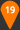
<style>
.page{position:relative;width:20px;height:30px;background:#ff7800}
.page>*{position:absolute;margin:0}
.t1{font:9px "OpenSans";color:#ffffff;font-weight:bold}
</style>
<div class="page">
<p class="t1" style="left:5px;top:6px;width:10px;height:8px">19</p>
</div>
